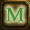
<style>
.page{position:relative;width:30px;height:30px}
.page>*{position:absolute;margin:0}
.t1{font:20px "TimesNewRomanPSMT";color:#3f963f;font-weight:bold}
</style>
<div class="page">
<p class="t1" style="left:6px;top:7px;width:19px;height:15px">M</p>
<p class="t1" style="left:6px;top:7px;width:19px;height:15px">M</p>
</div>
